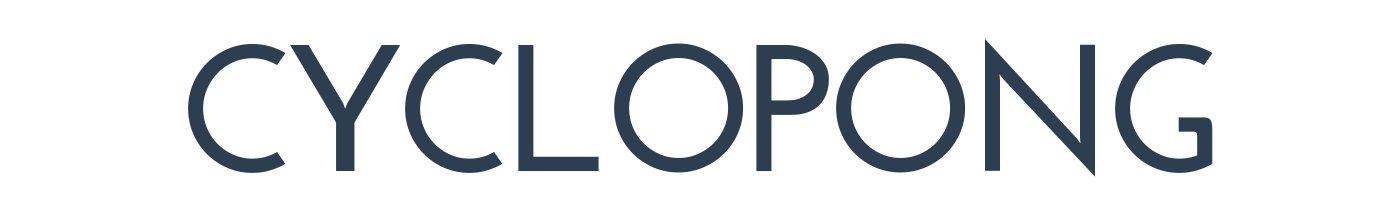
<style>
.page{position:relative;width:1400px;height:215px;background:#ffffff}
.page>*{position:absolute;margin:0}
.t1{font:180px "JosefinSans-Bold";letter-spacing:-0.05em;color:#2c3e50}
</style>
<div class="page">
<p class="t1" style="left:188px;top:39px;width:1025px;height:138px">CYCLOPONG</p>
</div>
